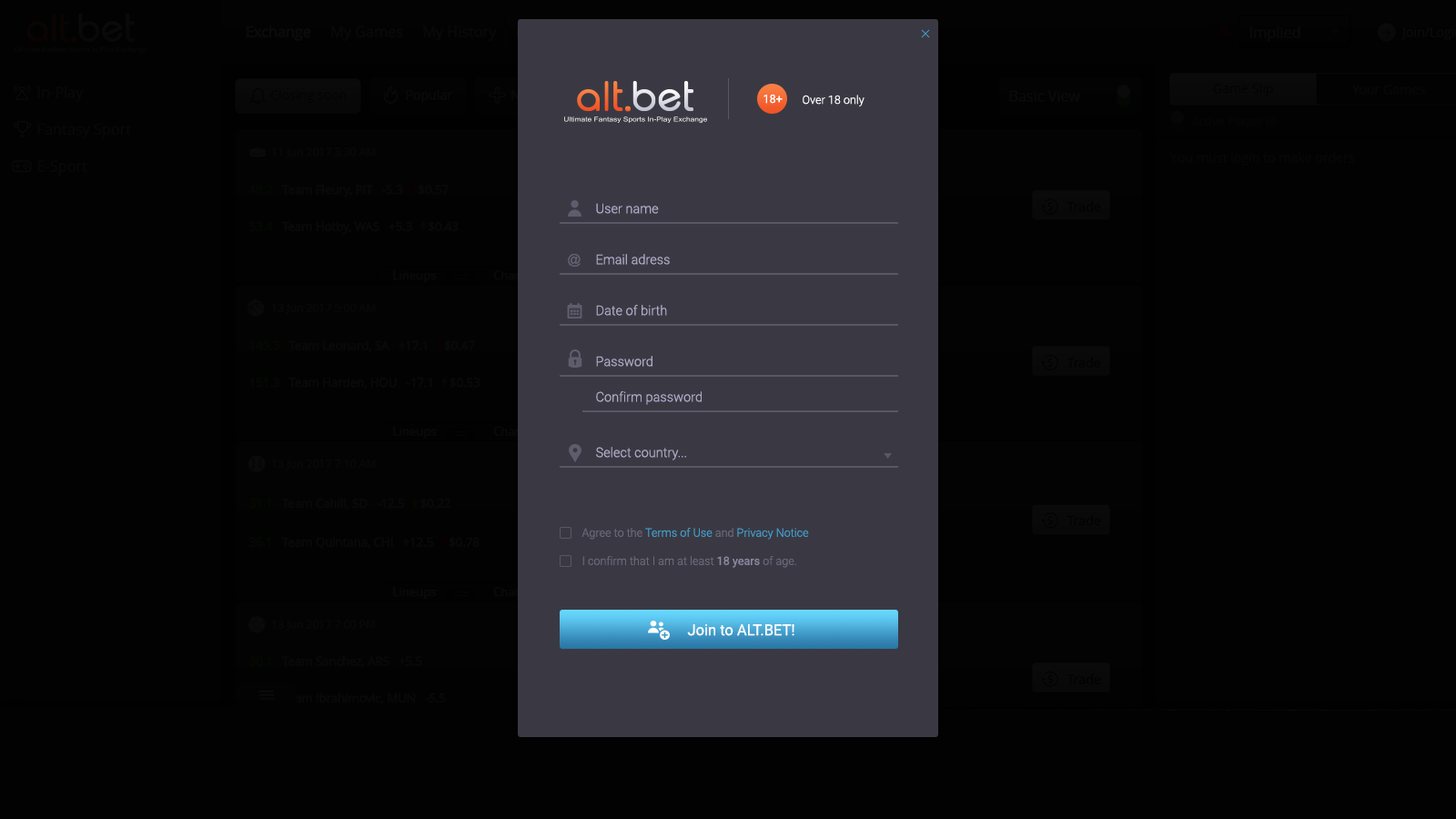
<style>
.page{position:relative;width:1456px;height:819px;background:#020202}
.page>*{position:absolute;margin:0}
.t1{font:11.6px "Roboto-Regular";color:#ffffff}
.t2{font:11.6px "Roboto-Light";color:#ffffff}
.t3{font:13.4px "Roboto-Light";color:#afabc8}
.t4{font:13.4px "ArialMT";color:#646272}
.t5{font:11.6px "Roboto-Light";color:#449fcc}
.t6{font:11.6px "Roboto-Light";color:#6b6a7c}
.t7{font:11.6px "Roboto-Regular";color:#8b89a1}
.t8{font:15.2px "Roboto-Regular";color:#ffffff}
</style>
<div class="page">
<p class="t1" style="left:763px;top:94px;width:20px;height:10px">18+</p>
<p class="t2" style="left:803px;top:95px;width:61px;height:11px">Over 18 only</p>
<p class="t3" style="left:596px;top:203px;width:63px;height:11px">User name</p>
<p class="t4" style="left:568px;top:254px;width:13px;height:13px">@</p>
<p class="t3" style="left:596px;top:254px;width:74px;height:11px">Email adress</p>
<p class="t3" style="left:596px;top:305px;width:71px;height:11px">Date of birth</p>
<p class="t3" style="left:596px;top:356px;width:56px;height:11px">Password</p>
<p class="t3" style="left:596px;top:391px;width:106px;height:14px">Confirm password</p>
<p class="t3" style="left:596px;top:447px;width:90px;height:13px">Select country...</p>
<p class="t5" style="left:581px;top:528px;width:228px;height:12px"><span class="t6">Agree to the </span>Terms of Use<span class="t6"> and </span>Privacy Notice</p>
<p class="t6" style="left:582px;top:556px;width:214px;height:12px">I confirm that I am at least <span class="t7">18 years</span> of age.</p>
<p class="t8" style="left:687px;top:624px;width:107px;height:12px">Join to ALT.BET!</p>
</div>
